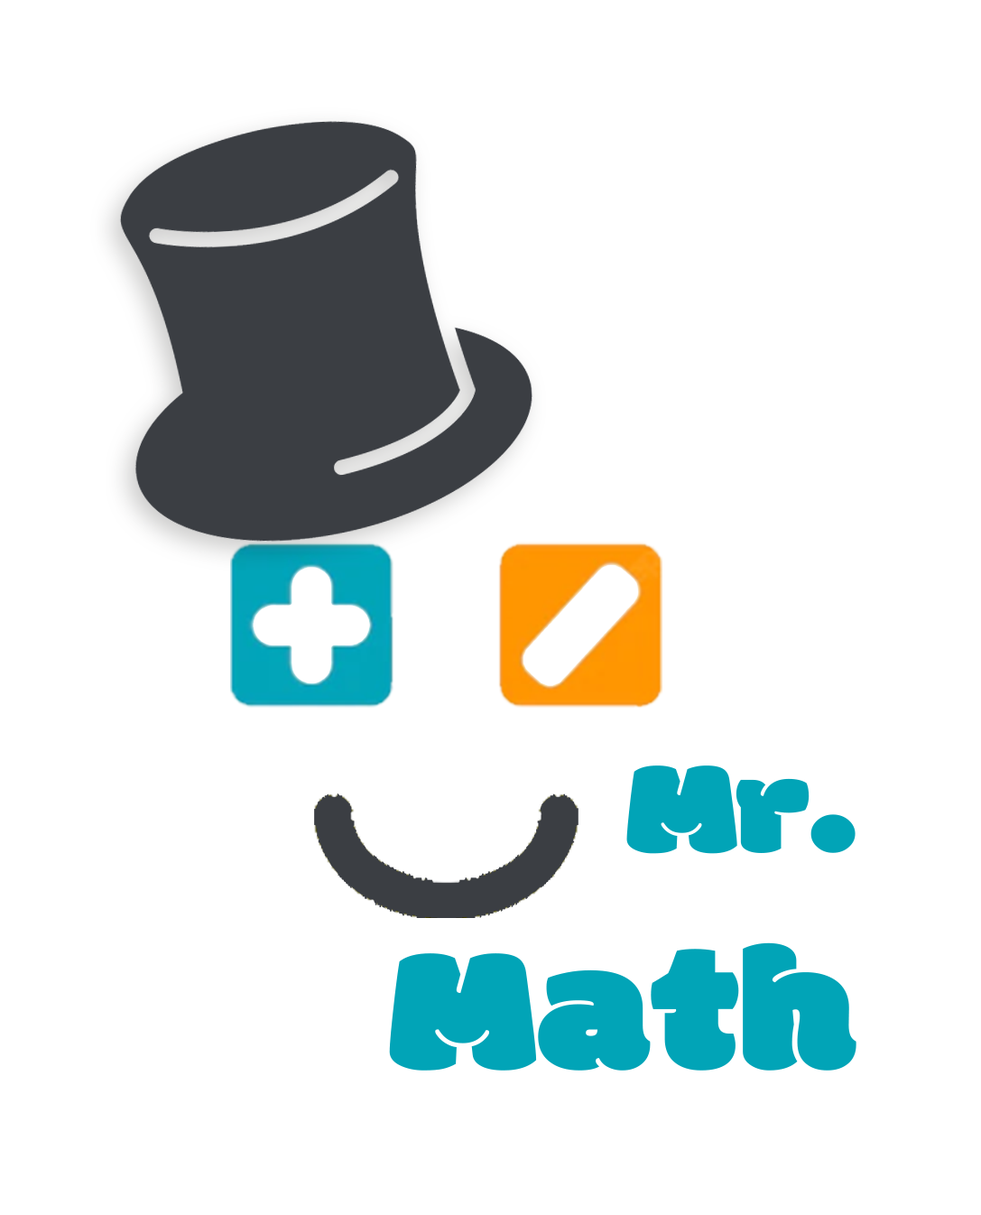
<style>
.page{position:relative;width:981px;height:1215px;background:#ffffff}
.page>*{position:absolute;margin:0}
.t1{font:180.6px/180.6px "Modak";color:#01a4b7;scale:1.15 1}
.t2{font:135.4px/180.6px "Modak";color:#01a4b7;scale:1.15 1}
</style>
<div class="page">
<p class="t1" style="left:389px;top:766px;width:468px;height:305px;text-align:right"><span class="t2">Mr.</span><br>Math</p>
</div>
